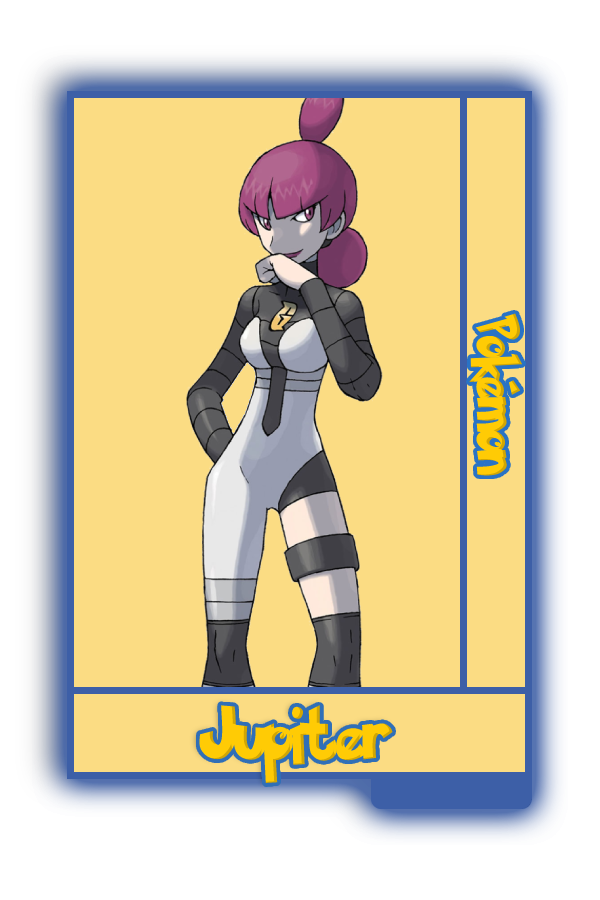
<style>
.page{position:relative;width:600px;height:900px;background:#fbdc83}
.page>*{position:absolute;margin:0}
.t1{font:48.8px "PokemonSolidNormal";color:#ffcb05;scale:0.8 1}
.t2{font:56.6px "PokemonSolidNormal";color:#ffcb05;scale:0.92 1}
</style>
<div class="page">
<p class="t1" style="left:469px;top:313px;width:54px;height:163px;rotate:90deg">Pokémon</p>
<p class="t2" style="left:199px;top:705px;width:194px;height:78px">Jupiter</p>
</div>
